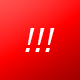
<style>
.page{position:relative;width:80px;height:80px}
.page>*{position:absolute;margin:0}
.t1{font:36px "Cambria-Italic";color:#ffffff}
</style>
<div class="page">
<p class="t1" style="left:25px;top:28px;width:30px;height:24px">!!!</p>
</div>
